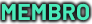
<style>
.page{position:relative;width:92px;height:24px;background:#49ebba}
.page>*{position:absolute;margin:0}
.t1{font:22.7px "Barlow-Bold";letter-spacing:0.017em;color:#49ebba}
</style>
<div class="page">
<p class="t1" style="left:2px;top:3px;width:87px;height:18px">MEMBRO</p>
</div>
